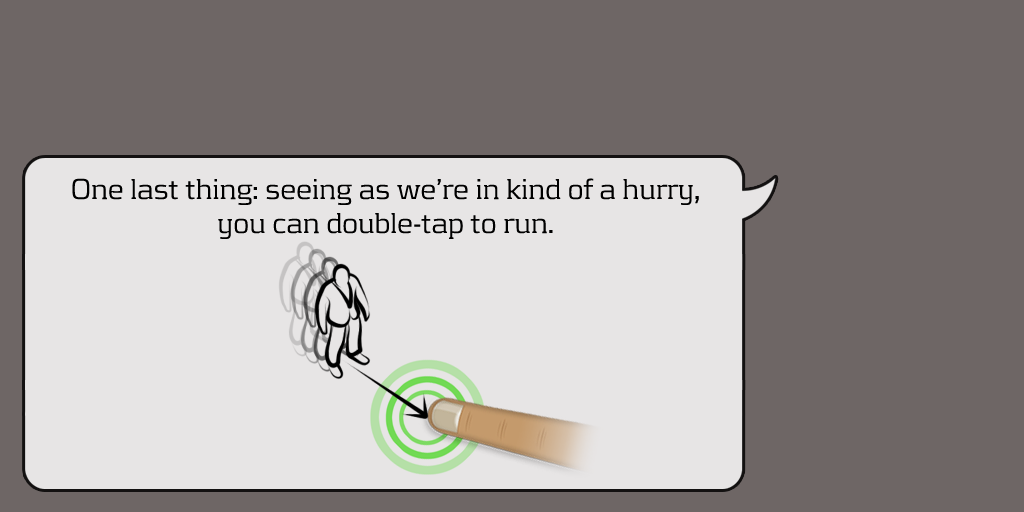
<style>
.page{position:relative;width:1024px;height:512px;background:#6e6665}
.page>*{position:absolute;margin:0}
.t1{font:30px/34px "KontrapunktLight";color:#000000}
</style>
<div class="page">
<p class="t1" style="left:72px;top:178px;width:627px;height:61px;text-align:center">One last thing: seeing as we’re in kind of a hurry, <br>you can double-tap to run.</p>
</div>
